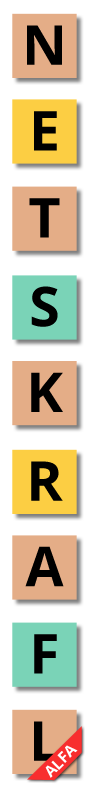
<style>
.page{position:relative;width:92px;height:800px;background:#ffffff}
.page>*{position:absolute;margin:0}
.t1{font:55px "OpenSans-Bold";color:#000000}
.t2{font:15.3px "OpenSans-Bold";color:#ffffff}
</style>
<div class="page">
<p class="t1" style="left:27px;top:25px;width:35px;height:40px">N</p>
<p class="t1" style="left:34px;top:111px;width:23px;height:40px">E</p>
<p class="t1" style="left:29px;top:198px;width:31px;height:40px">T</p>
<p class="t1" style="left:31px;top:286px;width:27px;height:41px">S</p>
<p class="t1" style="left:31px;top:372px;width:32px;height:40px">K</p>
<p class="t1" style="left:31px;top:461px;width:32px;height:40px">R</p>
<p class="t1" style="left:25px;top:546px;width:39px;height:41px">A</p>
<p class="t1" style="left:34px;top:634px;width:23px;height:40px">F</p>
<p class="t1" style="left:34px;top:721px;width:25px;height:40px">L</p>
<p class="t2" style="left:45px;top:745px;width:33px;height:33px;rotate:-45deg">ALFA</p>
</div>
